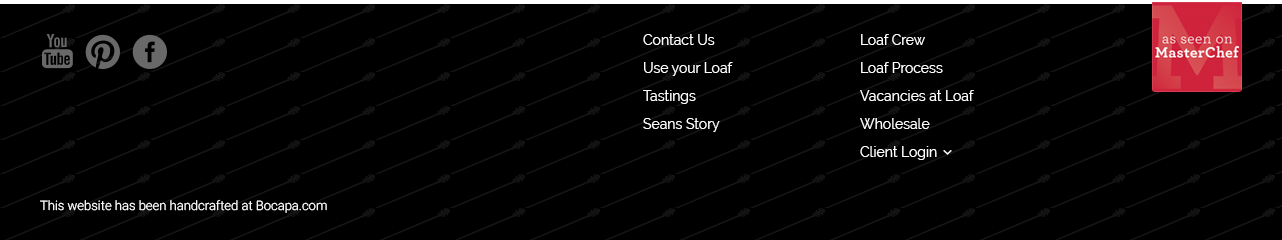
<style>
.page{position:relative;width:1282px;height:240px;background:#000000}
.page>*{position:absolute;margin:0}
.t1{font:14px/28px "Raleway-Regular";color:#ffffff}
.t2{font:13px "Roboto-Light";color:#ffffff}
</style>
<div class="page">
<p class="t1" style="left:643px;top:34px;width:90px;height:98px">Contact Us<br>Use your Loaf<br>Tastings<br>Seans Story</p>
<p class="t1" style="left:860px;top:34px;width:114px;height:126px">Loaf Crew<br>Loaf Process<br>Vacancies at Loaf<br>Wholesale<br>Client Login</p>
<p class="t2" style="left:40px;top:199px;width:287px;height:14px">This website has been handcrafted at Bocapa.com</p>
</div>
